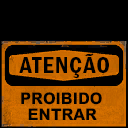
<style>
.page{position:relative;width:128px;height:128px;background:#000000}
.page>*{position:absolute;margin:0}
.t1{font:23.1px "FranklinGothic-DemiCnd";letter-spacing:0.05em;color:#000000}
.t2{font:16px "MHeiPRC-Xbold";color:#000000}
</style>
<div class="page">
<p class="t1" style="left:19px;top:53px;width:90px;height:25px">ATENÇÃO</p>
<p class="t2" style="left:21px;top:92px;width:81px;height:13px">PROIBIDO</p>
<p class="t2" style="left:28px;top:108px;width:69px;height:12px">ENTRAR</p>
</div>
